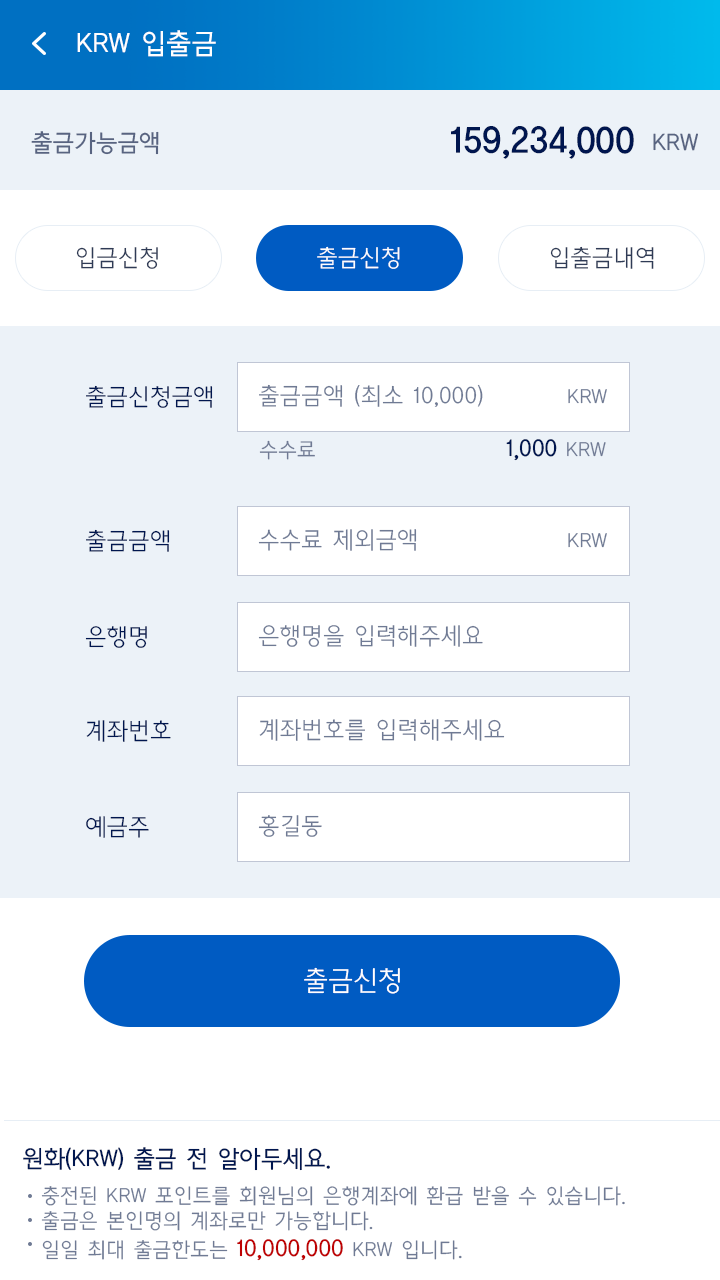
<style>
.page{position:relative;width:720px;height:1280px;background:#ffffff}
.page>*{position:absolute;margin:0}
.t1{font:28px "CreGoM";color:#ffffff}
.t2{font:36px "CreGoB";color:#00164f}
.t3{font:24px "CreGoM";color:#586481}
.t4{font:24px "CreGoL";color:#ffffff}
.t5{font:24px "CreGoL";color:#2f3b56}
.t6{font:24px "CreGoL";color:#00164f}
.t7{font:24px "CreGoL";color:#6f7a94}
.t8{font:21px "CreGoL";color:#6f7a94}
.t9{font:24px "CreGoM";color:#00164f}
.t10{font:28px "CreGoL";color:#ffffff}
.t11{font:24px "CreGoM";color:#be0102}
</style>
<div class="page">
<p class="t1" style="left:77px;top:30px;width:139px;height:27px">KRW 입출금</p>
<p class="t2" style="left:451px;top:126px;width:183px;height:33px">159,234,000</p>
<p class="t3" style="left:31px;top:131px;width:128px;height:24px">출금가능금액</p>
<p class="t3" style="left:653px;top:133px;width:45px;height:18px">KRW</p>
<p class="t4" style="left:317px;top:246px;width:83px;height:23px">출금신청</p>
<p class="t5" style="left:550px;top:246px;width:104px;height:23px">입출금내역</p>
<p class="t5" style="left:76px;top:247px;width:82px;height:22px">입금신청</p>
<p class="t6" style="left:86px;top:385px;width:127px;height:23px">출금신청금액</p>
<p class="t7" style="left:259px;top:384px;width:224px;height:23px">출금금액 (최소 10,000)</p>
<p class="t8" style="left:568px;top:389px;width:39px;height:15px">KRW</p>
<p class="t8" style="left:259px;top:440px;width:56px;height:20px">수수료</p>
<p class="t9" style="left:506px;top:439px;width:100px;height:22px">1,000<span class="t8"> KRW</span></p>
<p class="t6" style="left:86px;top:529px;width:84px;height:23px">출금금액</p>
<p class="t7" style="left:258px;top:529px;width:159px;height:22px">수수료 제외금액</p>
<p class="t8" style="left:568px;top:533px;width:39px;height:15px">KRW</p>
<p class="t6" style="left:85px;top:626px;width:62px;height:22px">은행명</p>
<p class="t7" style="left:258px;top:625px;width:225px;height:22px">은행명을 입력해주세요</p>
<p class="t6" style="left:86px;top:720px;width:85px;height:22px">계좌번호</p>
<p class="t7" style="left:259px;top:719px;width:246px;height:22px">계좌번호를 입력해주세요</p>
<p class="t6" style="left:86px;top:816px;width:63px;height:22px">예금주</p>
<p class="t7" style="left:258px;top:815px;width:64px;height:22px">홍길동</p>
<p class="t10" style="left:304px;top:967px;width:96px;height:27px">출금신청</p>
<p class="t9" style="left:23px;top:1147px;width:307px;height:24px">원화(KRW) 출금 전 알아두세요.</p>
<p class="t8" style="left:41px;top:1186px;width:584px;height:75px">충전된 KRW 포인트를 회원님의 은행계좌에 환급 받을 수 있습니다.<br>출금은 본인명의 계좌로만 가능합니다.<br>일일 최대 출금한도는 <span class="t11">10,000,000</span> KRW 입니다.</p>
</div>
